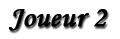
<style>
.page{position:relative;width:120px;height:39px;background:#ffffff}
.page>*{position:absolute;margin:0}
.t1{font:30px "MonotypeCorsiva";color:#010101;font-weight:bold}
</style>
<div class="page">
<p class="t1" style="left:9px;top:9px;width:99px;height:22px">Joueur 2</p>
</div>
